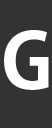
<style>
.page{position:relative;width:52px;height:128px;background:#333333}
.page>*{position:absolute;margin:0}
.t1{font:75px "AdobeGothicStd-Bold";color:#ffffff}
</style>
<div class="page">
<p class="t1" style="left:4px;top:30px;width:45px;height:60px">G</p>
</div>
